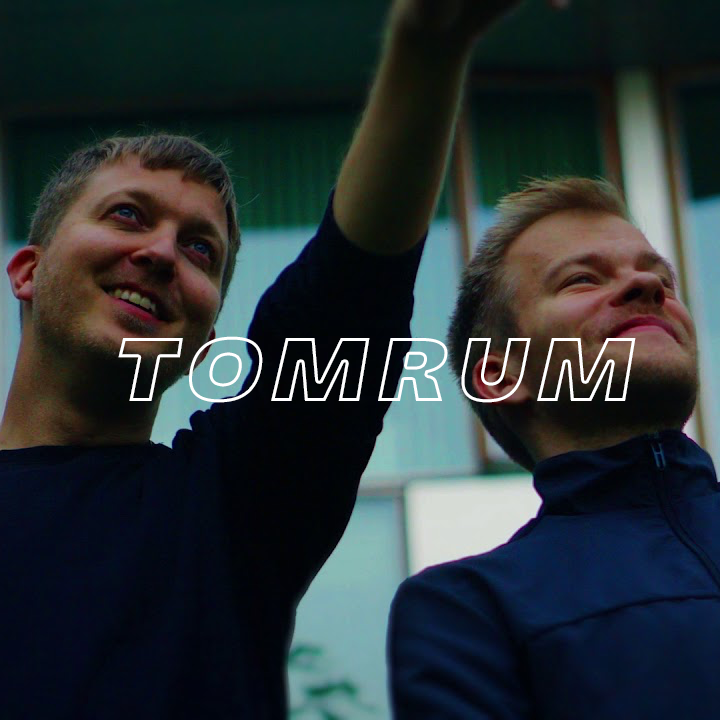
<style>
.page{position:relative;width:720px;height:720px}
.page>*{position:absolute;margin:0}
.t1{font:90px "Majoris-Italic";letter-spacing:0.1em;text-transform:uppercase}
</style>
<div class="page">
<p class="t1" style="left:118px;top:336px;width:518px;height:67px">tomrum</p>
</div>
